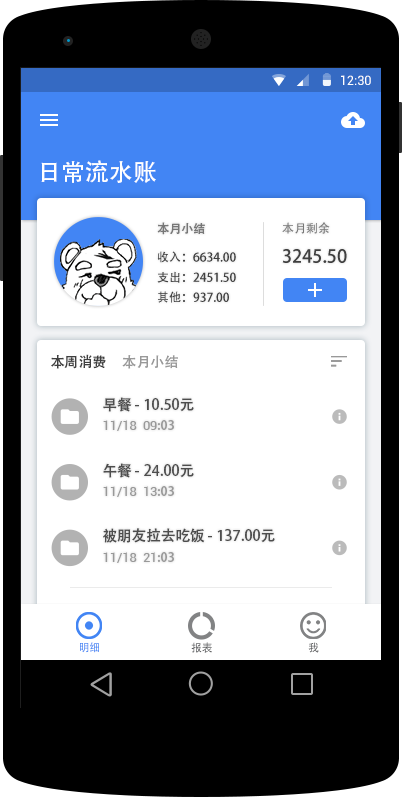
<style>
.page{position:relative;width:402px;height:797px;background:#ffffff}
.page>*{position:absolute;margin:0}
.t1{font:12.7px "Roboto-Regular";color:#ffffff}
.t2{font:24px "AdobeHeitiStd-Regular";color:#ffffff}
.t3{font:12px "AdobeHeitiStd-Regular";color:#777777}
.t4{font:18px/30px "AdobeHeitiStd-Regular";color:#3f3f3f}
.t5{font:12px/30px "AdobeHeitiStd-Regular";color:#777777}
.t6{font:12px/20px "AdobeHeitiStd-Regular";color:#3f3f3f}
.t7{font:14px "AdobeHeitiStd-Regular";color:#3f3f3f}
.t8{font:14px "AdobeHeitiStd-Regular";color:#999999}
.t9{font:14.6px "AdobeHeitiStd-Regular";color:#4d4d4d}
.t10{font:12.8px "Roboto-Regular";color:#999999}
.t11{font:12.8px "AdobeHeitiStd-Regular";color:#999999}
.t12{font:11px "AdobeHeitiStd-Regular"}
.t13{font:11px "AdobeHeitiStd-Regular";color:#58595b}
</style>
<div class="page">
<p class="t1" style="left:341px;top:75px;width:30px;height:10px">12:30</p>
<p class="t2" style="left:41px;top:160px;width:115px;height:23px">日常流水账</p>
<p class="t3" style="left:157px;top:222px;width:48px;height:13px">本月小结</p>
<p class="t4" style="left:282px;top:222px;width:65px;height:41px"><span class="t5">本月剩余<br></span>3245.50</p>
<p class="t6" style="left:157px;top:251px;width:79px;height:52px">收入：6634.00<br>支出：2451.50<br>其他：937.00</p>
<p class="t7" style="left:51px;top:354px;width:127px;height:15px">本周消费<span class="t8">     本月小结</span></p>
<p class="t9" style="left:103px;top:397px;width:91px;height:15px">早餐 - 10.50元</p>
<p class="t10" style="left:103px;top:420px;width:71px;height:11px">11/18  09<span class="t11">:03</span></p>
<p class="t9" style="left:103px;top:463px;width:91px;height:15px">午餐 - 24.00元</p>
<p class="t10" style="left:103px;top:486px;width:71px;height:11px">11/18  13<span class="t11">:03</span></p>
<p class="t9" style="left:103px;top:528px;width:172px;height:15px">被朋友拉去吃饭 - 137.00元</p>
<p class="t10" style="left:103px;top:552px;width:71px;height:11px">11/18  21<span class="t11">:03</span></p>
<p class="t12" style="left:80px;top:642px;width:19px;height:11px">明细</p>
<p class="t13" style="left:191px;top:642px;width:21px;height:11px">报表</p>
<p class="t12" style="left:308px;top:642px;width:11px;height:11px">我</p>
</div>
